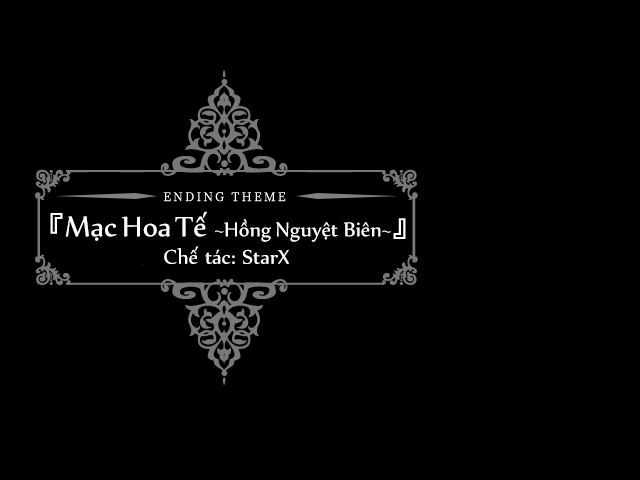
<style>
.page{position:relative;width:640px;height:480px;background:#000000}
.page>*{position:absolute;margin:0}
.t1{font:24px "UTM-Nyala";color:#ffffff}
.t2{font:34px "UTM-Nyala";color:#ffffff}
</style>
<div class="page">
<p class="t1" style="left:65px;top:211px;width:326px;height:31px"><span class="t2">Mạc Hoa Tế </span>~Hồng Nguyệt Biên~</p>
<p class="t1" style="left:164px;top:246px;width:125px;height:18px">Chế tác: StarX</p>
</div>
